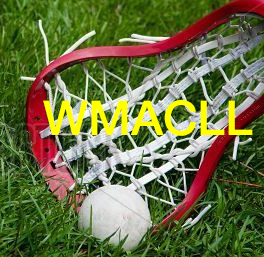
<style>
.page{position:relative;width:264px;height:257px}
.page>*{position:absolute;margin:0}
.t1{font:48px "HelveticaNeue-Medium";color:#ffff00}
</style>
<div class="page">
<p class="t1" style="left:43px;top:100px;width:210px;height:36px">WMACLL</p>
</div>
